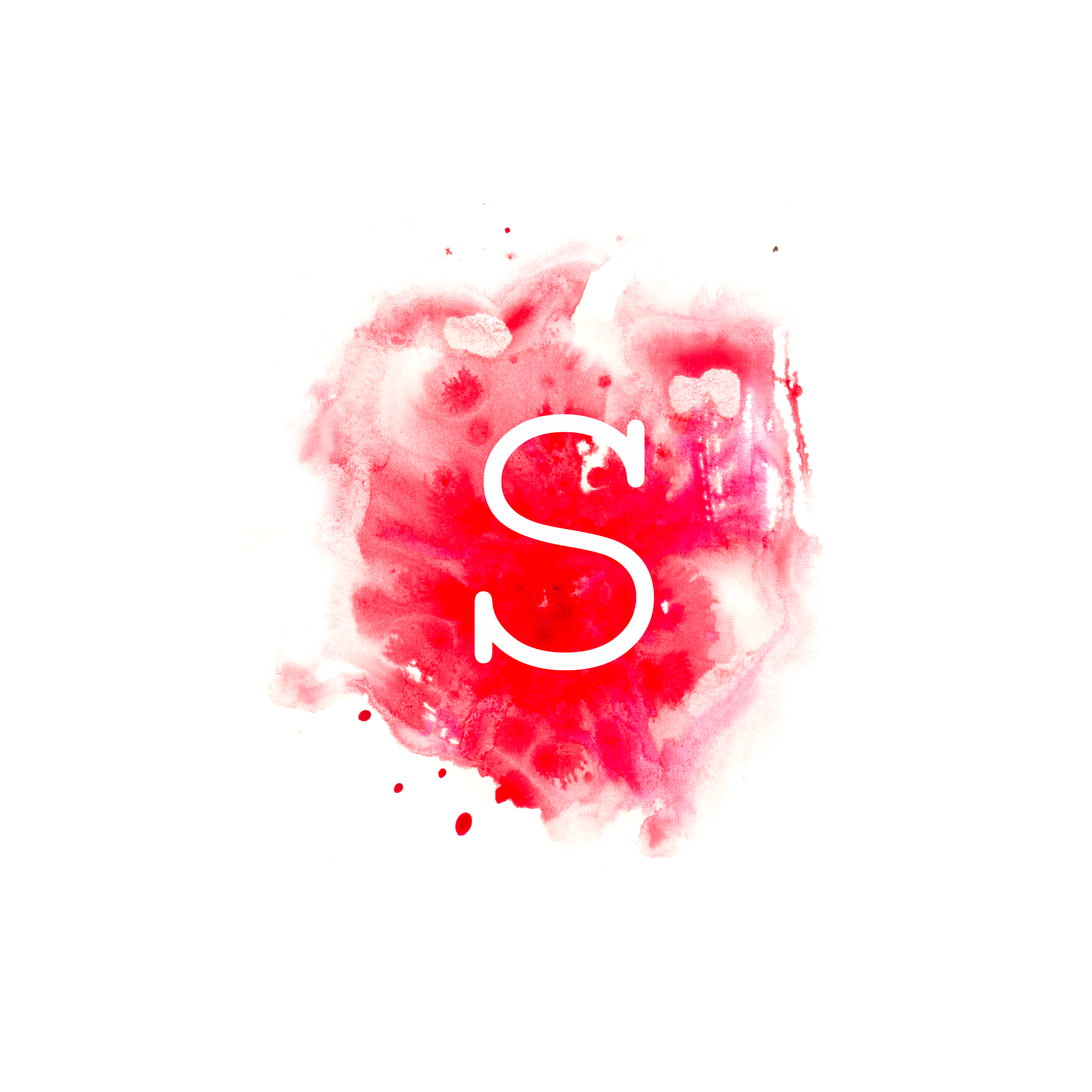
<style>
.page{position:relative;width:1092px;height:1092px;background:#ffffff}
.page>*{position:absolute;margin:0}
.t1{font:426.5px "CourierNewPSMT";letter-spacing:0.1em;color:#fffefe}
</style>
<div class="page">
<p class="t1" style="left:475px;top:414px;width:179px;height:256px">S</p>
</div>
